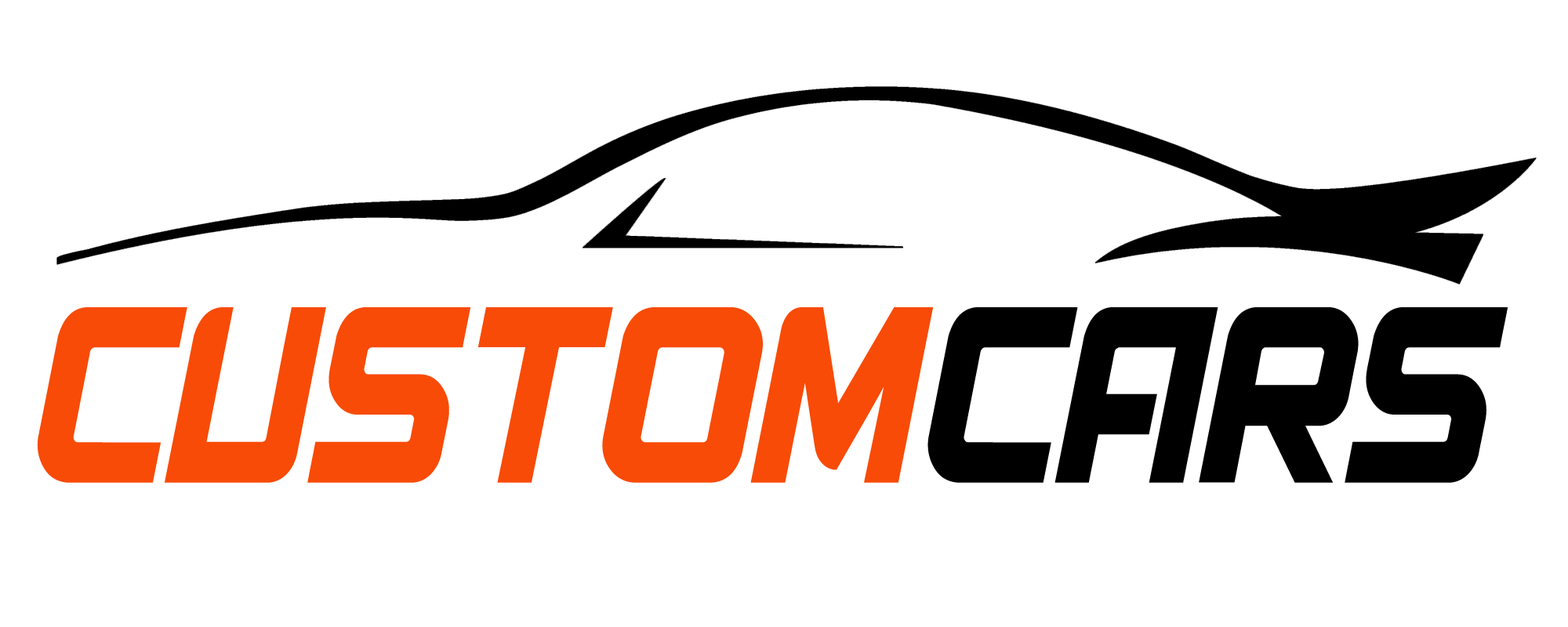
<style>
.page{position:relative;width:1568px;height:627px;background:#ffffff}
.page>*{position:absolute;margin:0}
.t1{font:266.2px "Spantaran";color:#f84b07;scale:0.82 1}
.t2{font:266.2px "Spantaran";color:#000000;scale:0.82 1}
</style>
<div class="page">
<p class="t1" style="left:37px;top:307px;width:1471px;height:176px">CUSTOM<span class="t2">CARS</span></p>
</div>
